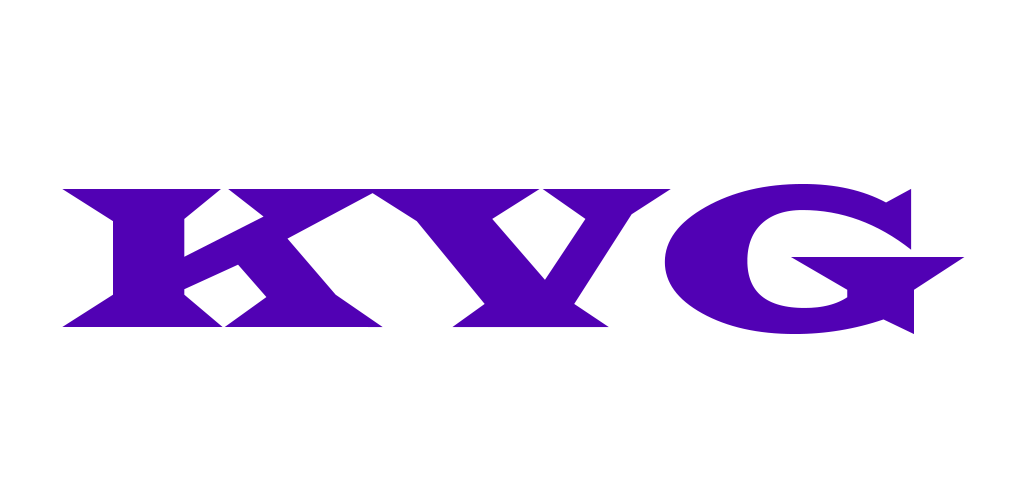
<style>
.page{position:relative;width:1024px;height:500px;background:#ffffff}
.page>*{position:absolute;margin:0}
.t1{font:207.4px "LatinWide";color:#5101b4}
</style>
<div class="page">
<p class="t1" style="left:62px;top:184px;width:903px;height:151px">KVG</p>
</div>
